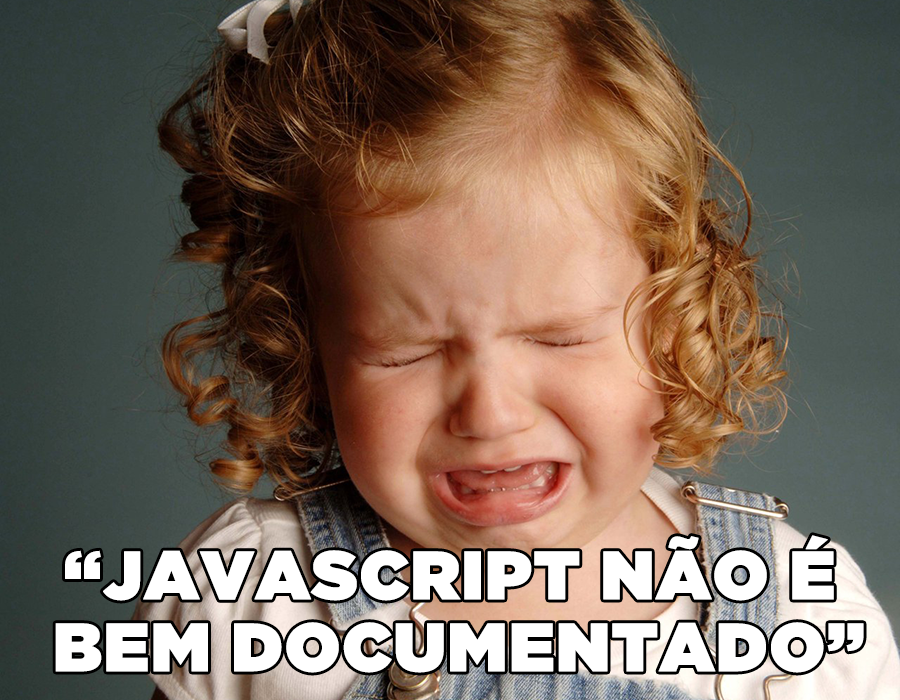
<style>
.page{position:relative;width:900px;height:700px}
.page>*{position:absolute;margin:0}
.t1{font:68px/72px "GothamUltra";color:#ffffff;font-weight:bold}
</style>
<div class="page">
<p class="t1" style="left:55px;top:535px;width:809px;height:138px;text-align:center">“JAVASCRIPT NÃO É <br>BEM DOCUMENTADO”</p>
</div>
